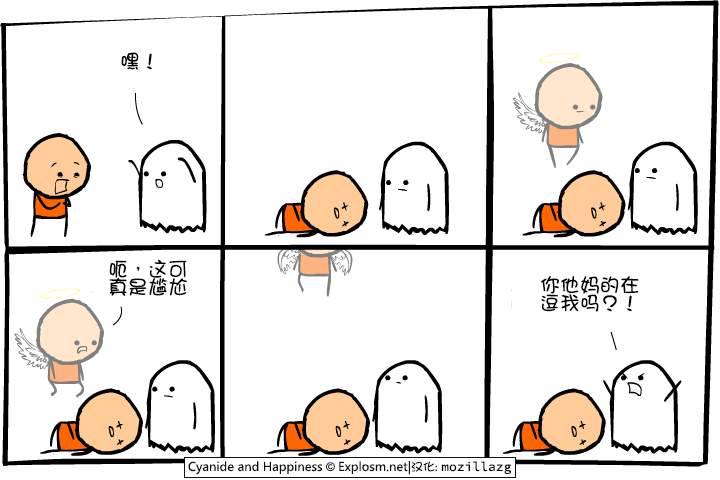
<style>
.page{position:relative;width:720px;height:480px;background:#ffffff}
.page>*{position:absolute;margin:0}
.t1{font:20px "DFGirl";color:#000000}
.t2{font:20px/18px "DFGirl";color:#000000}
</style>
<div class="page">
<p class="t1" style="left:121px;top:52px;width:31px;height:18px">嘿！</p>
<p class="t2" style="left:109px;top:259px;width:78px;height:37px">呃，这可<br>真是尴尬</p>
<p class="t2" style="left:540px;top:276px;width:99px;height:36px">你他妈的在<br>逗我吗？！</p>
</div>
